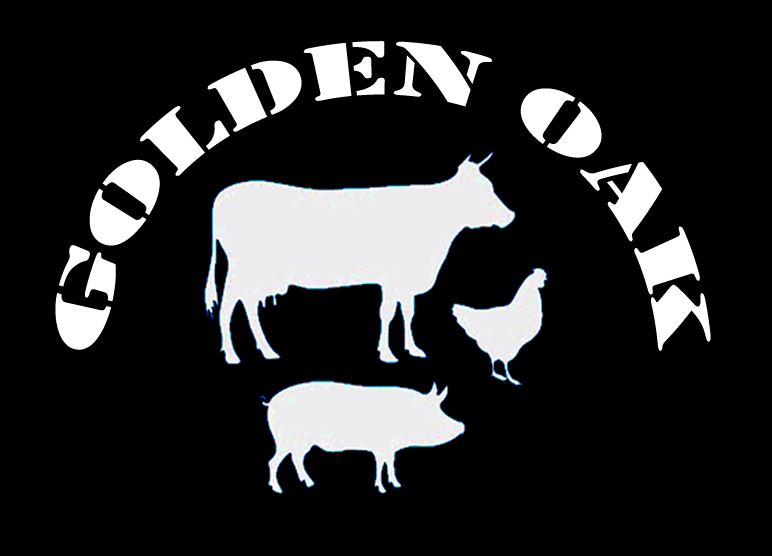
<style>
.page{position:relative;width:772px;height:556px;background:#000000}
.page>*{position:absolute;margin:0}
.t1{font:79.7px "Stencil";color:#ffffff;text-transform:uppercase}
</style>
<div class="page">
<p class="t1" style="left:55px;top:41px;width:656px;height:310px;text-align:center">GOLDEN OAK</p>
</div>
